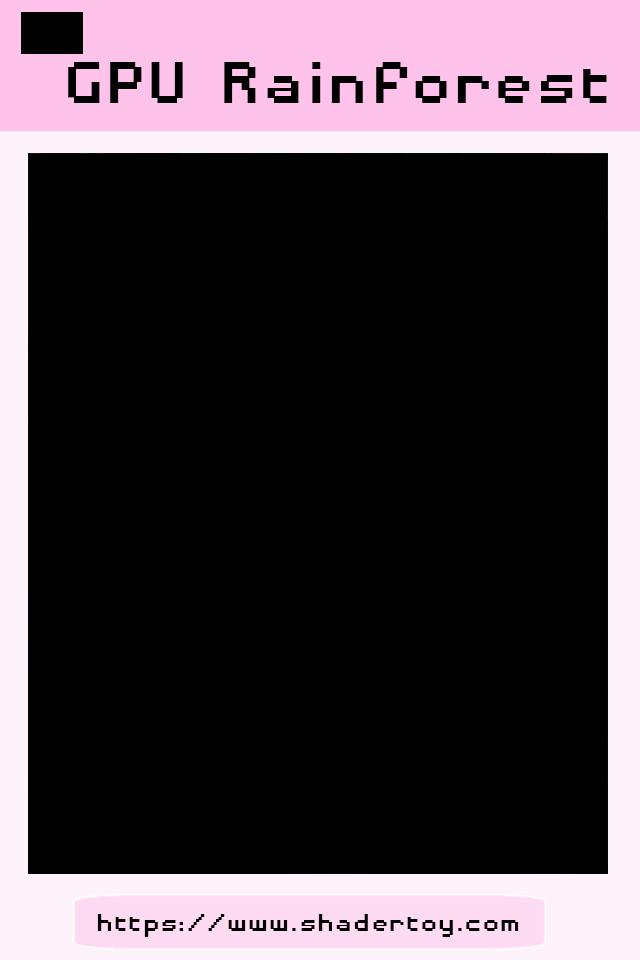
<style>
.page{position:relative;width:640px;height:960px;background:#000000}
.page>*{position:absolute;margin:0}
.t1{font:76.6px "DisposableDroidBB";color:#000000;scale:1.14 1}
.t2{font:31.9px "DisposableDroidBB";color:#000000;scale:1.14 1}
</style>
<div class="page">
<p class="t1" style="left:68px;top:62px;width:539px;height:41px">GPU Rainforest</p>
<p class="t2" style="left:97px;top:914px;width:422px;height:23px">https://www.shadertoy.com</p>
</div>
